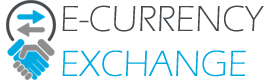
<style>
.page{position:relative;width:270px;height:80px;background:#ffffff}
.page>*{position:absolute;margin:0}
.t1{font:37.3px "ErasITC-Light";color:#454a4f}
.t2{font:37.3px "ErasITC-Light";color:#00a9e0}
</style>
<div class="page">
<p class="t1" style="left:62px;top:5px;width:202px;height:72px">E-CURRENCY<br><span class="t2">EXCHANGE</span></p>
</div>
